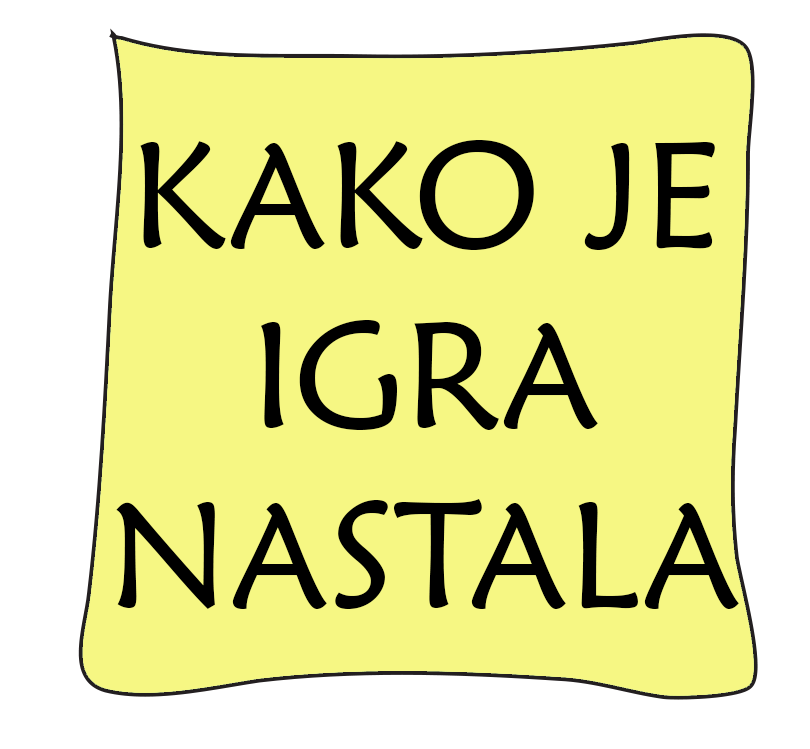
<style>
.page{position:relative;width:810px;height:749px;background:#f6f783}
.page>*{position:absolute;margin:0}
.t1{font:150px "MaiandraGD-Regular";color:#000000}
</style>
<div class="page">
<p class="t1" style="left:116px;top:140px;width:623px;height:469px;text-align:center">KAKO JE<br>IGRA<br>NASTALA</p>
</div>
